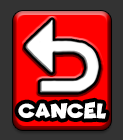
<style>
.page{position:relative;width:123px;height:140px;background:#333333}
.page>*{position:absolute;margin:0}
.t1{font:21.1px "Funhouse";color:#ffffff}
</style>
<div class="page">
<p class="t1" style="left:18px;top:101px;width:88px;height:18px">CANCEL</p>
</div>
